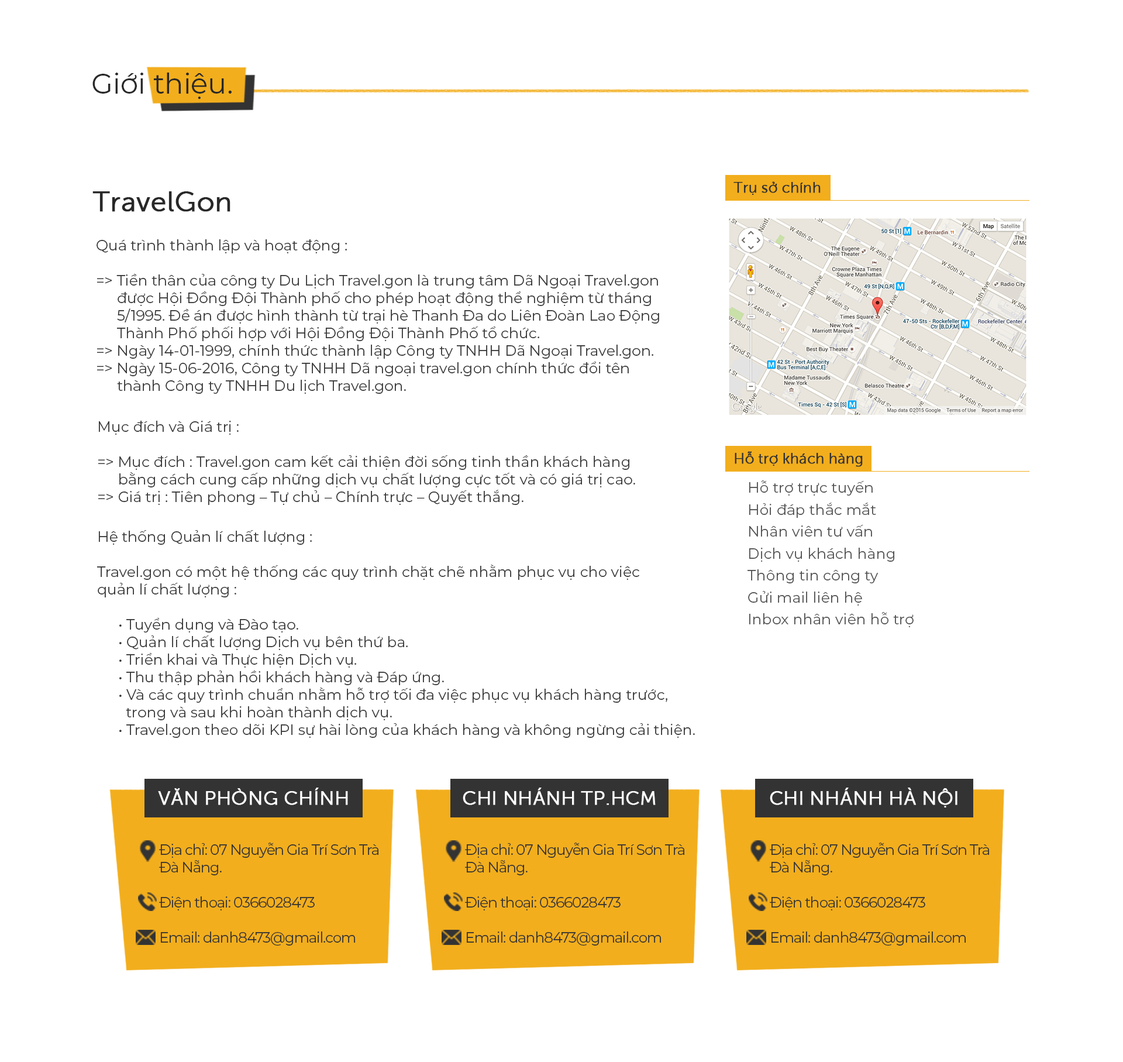
<style>
.page{position:relative;width:1123px;height:1062px;background:#ffffff}
.page>*{position:absolute;margin:0}
.t1{font:28.1px "Montserrat-Regular";color:#282828}
.t2{font:14.6px "SVN-MuseoSans";color:#333333;font-weight:bold}
.t3{font:28.1px "SVN-MuseoSans";color:#282828;font-weight:bold}
.t4{font:14.6px "Montserrat-Regular";color:#343434}
.t5{font:14.6px/21.9px "Montserrat-Regular";letter-spacing:0.005em;color:#4f4e4e}
.t6{font:19.5px "SVN-MuseoSans";color:#ffffff;font-weight:bold}
.t7{font:14.6px "Montserrat-Regular";letter-spacing:-0.05em;color:#333333}
</style>
<div class="page">
<p class="t1" style="left:92px;top:73px;width:140px;height:26px">Giới thiệu.</p>
<p class="t2" style="left:734px;top:181px;width:87px;height:14px">Trụ sở chính</p>
<p class="t3" style="left:92px;top:191px;width:138px;height:21px">TravelGon</p>
<p class="t4" style="left:97px;top:239px;width:562px;height:155px">Quá trình thành lập và hoạt động :<br><br>=&gt; Tiền thân của công ty Du Lịch Travel.gon là trung tâm Dã Ngoại Travel.gon <br> được Hội Đồng Đội Thành phố cho phép hoạt động thể nghiệm từ tháng <br> 5/1995. Đề án được hình thành từ trại hè Thanh Đa do Liên Đoàn Lao Động<br> Thành Phố phối hợp với Hội Đồng Đội Thành Phố tổ chức.<br>=&gt; Ngày 14-01-1999, chính thức thành lập Công ty TNHH Dã Ngoại Travel.gon.<br>=&gt; Ngày 15-06-2016, Công ty TNHH Dã ngoại travel.gon chính thức đổi tên <br> thành Công ty TNHH Du lịch Travel.gon.</p>
<p class="t4" style="left:98px;top:421px;width:537px;height:84px">Mục đích và Giá trị :<br><br>=&gt; Mục đích : Travel.gon cam kết cải thiện đời sống tinh thần khách hàng <br> bằng cách cung cấp những dịch vụ chất lượng cực tốt và có giá trị cao.<br>=&gt; Giá trị : Tiên phong – Tự chủ – Chính trực – Quyết thắng.</p>
<p class="t2" style="left:735px;top:451px;width:128px;height:16px">Hỗ trợ khách hàng</p>
<p class="t5" style="left:748px;top:480px;width:166px;height:147px">Hỗ trợ trực tuyến<br>Hỏi đáp thắc mắt<br>Nhân viên tư vấn<br>Dịch vụ khách hàng<br>Thông tin công ty<br>Gửi mail liên hệ<br>Inbox nhân viên hỗ trợ</p>
<p class="t4" style="left:97px;top:530px;width:598px;height:208px">Hệ thống Quản lí chất lượng :<br><br>Travel.gon có một hệ thống các quy trình chặt chẽ nhằm phục vụ cho việc<br>quản lí chất lượng :<br><br> • Tuyển dụng và Đào tạo.<br> • Quản lí chất lượng Dịch vụ bên thứ ba.<br> • Triển khai và Thực hiện Dịch vụ.<br> • Thu thập phản hồi khách hàng và Đáp ứng.<br> • Và các quy trình chuẩn nhằm hỗ trợ tối đa việc phục vụ khách hàng trước,<br>   trong và sau khi hoàn thành dịch vụ.<br> • Travel.gon theo dõi KPI sự hài lòng của khách hàng và không ngừng cải thiện.</p>
<p class="t6" style="left:158px;top:787px;width:190px;height:18px">VĂN PHÒNG CHÍNH</p>
<p class="t6" style="left:463px;top:787px;width:193px;height:18px">CHI NHÁNH TP.HCM</p>
<p class="t6" style="left:770px;top:787px;width:188px;height:20px">CHI NHÁNH HÀ NỘI</p>
<p class="t7" style="left:159px;top:842px;width:219px;height:103px">Địa chỉ: 07 Nguyễn Gia Trí Sơn Trà<br>Đà Nẵng.<br><br>Điện thoại: 0366028473<br><br>Email: danh8473@gmail.com</p>
<p class="t7" style="left:465px;top:842px;width:219px;height:103px">Địa chỉ: 07 Nguyễn Gia Trí Sơn Trà<br>Đà Nẵng.<br><br>Điện thoại: 0366028473<br><br>Email: danh8473@gmail.com</p>
<p class="t7" style="left:770px;top:842px;width:219px;height:103px">Địa chỉ: 07 Nguyễn Gia Trí Sơn Trà<br>Đà Nẵng.<br><br>Điện thoại: 0366028473<br><br>Email: danh8473@gmail.com</p>
</div>
